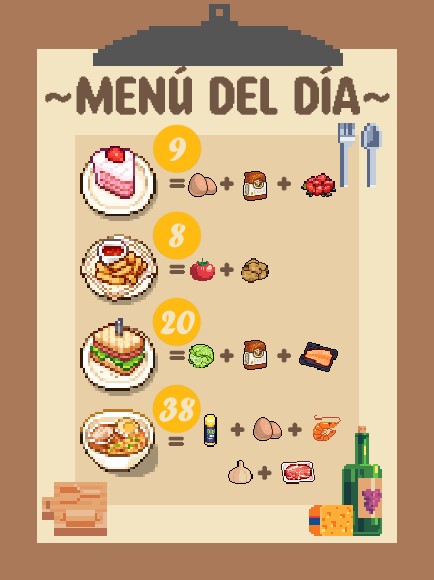
<style>
.page{position:relative;width:434px;height:580px;background:#e8cfa6}
.page>*{position:absolute;margin:0}
.t1{font:54.4px "StayPixel-Regular";color:#725644;scale:1.05 1}
.t2{font:36px "ForteMT";color:#f3e5c2}
.t3{font:36px "StayPixel-Regular";color:#725644}
</style>
<div class="page">
<p class="t1" style="left:45px;top:65px;width:345px;height:50px">~Menú del día~</p>
<p class="t2" style="left:169px;top:137px;width:17px;height:24px">9</p>
<p class="t3" style="left:169px;top:176px;width:122px;height:15px">=   +    +</p>
<p class="t2" style="left:169px;top:223px;width:17px;height:25px">8</p>
<p class="t3" style="left:169px;top:262px;width:65px;height:15px">=   +</p>
<p class="t2" style="left:160px;top:310px;width:35px;height:25px">20</p>
<p class="t3" style="left:169px;top:348px;width:122px;height:15px">=   +    +</p>
<p class="t2" style="left:159px;top:397px;width:36px;height:25px">38</p>
<p class="t3" style="left:230px;top:422px;width:72px;height:58px">+    +<br>   +</p>
<p class="t3" style="left:168px;top:436px;width:16px;height:10px">=</p>
</div>
